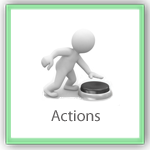
<style>
.page{position:relative;width:150px;height:150px;background:#ffffff}
.page>*{position:absolute;margin:0}
.t1{font:15.9px "MyriadPro-Regular";color:#615f5f}
</style>
<div class="page">
<p class="t1" style="left:51px;top:110px;width:49px;height:12px">Actions</p>
</div>
